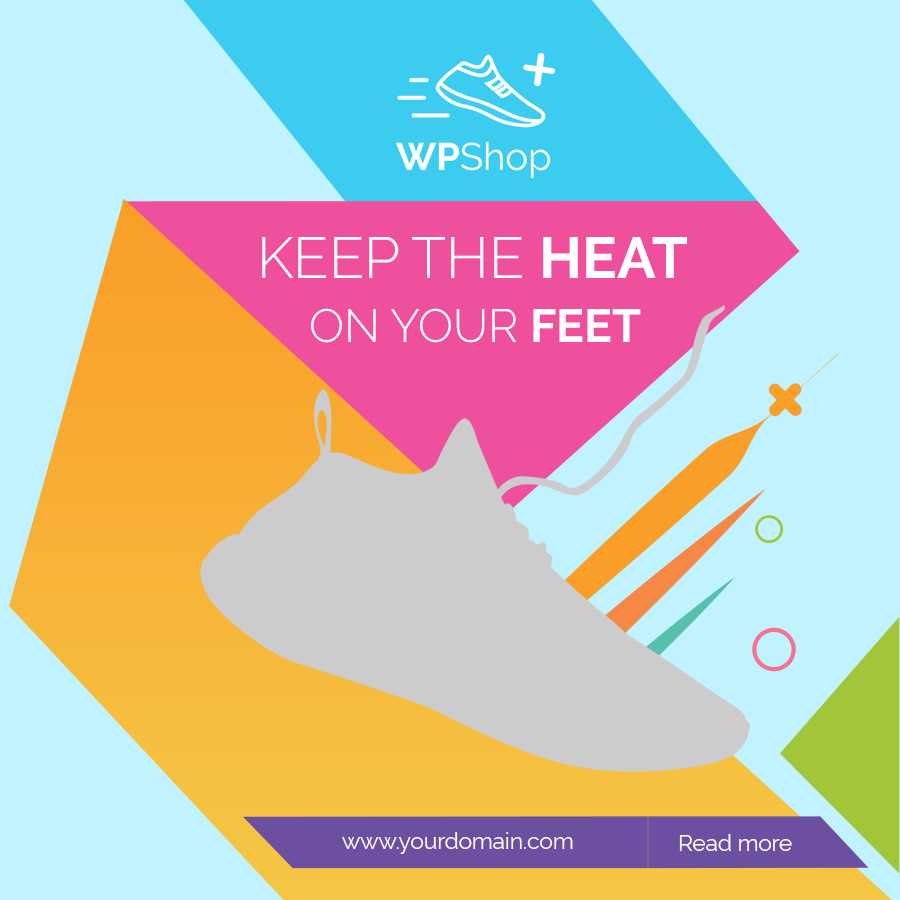
<style>
.page{position:relative;width:900px;height:900px;background:#c0f3ff}
.page>*{position:absolute;margin:0}
.t1{font:57.8px "Raleway-Light";color:#ffffff}
.t2{font:57.8px "Raleway-Bold";color:#ffffff}
.t3{font:46.5px "Raleway-Light";color:#ffffff}
.t4{font:46.5px "Raleway-Bold";color:#ffffff}
.t5{font:22.5px "Raleway-Regular";color:#ffffff}
</style>
<div class="page">
<p class="t1" style="left:262px;top:237px;width:425px;height:41px">KEEP THE <span class="t2">HEAT</span></p>
<p class="t3" style="left:311px;top:308px;width:330px;height:35px">ON YOUR<span class="t4"> FEET</span></p>
<p class="t5" style="left:342px;top:832px;width:231px;height:22px">www.yourdomain.com</p>
<p class="t5" style="left:679px;top:834px;width:113px;height:17px">Read more</p>
</div>
